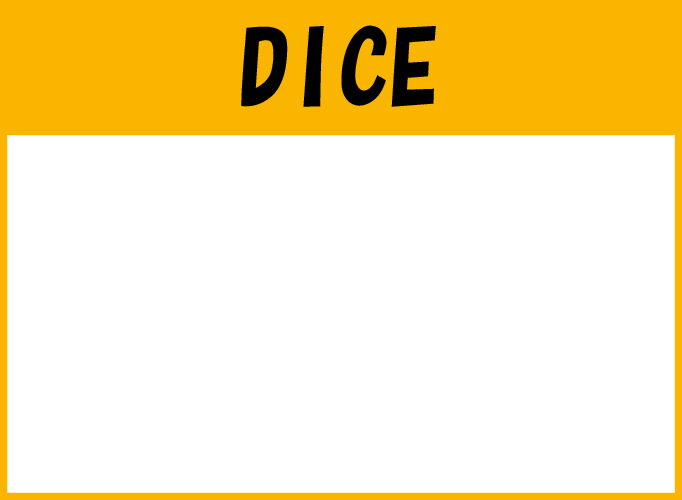
<style>
.page{position:relative;width:682px;height:500px;background:#ffffff}
.page>*{position:absolute;margin:0}
.t1{font:100px "HGSoeiKakupoptai";color:#000000}
</style>
<div class="page">
<p class="t1" style="left:241px;top:25px;width:195px;height:82px">DICE</p>
</div>
